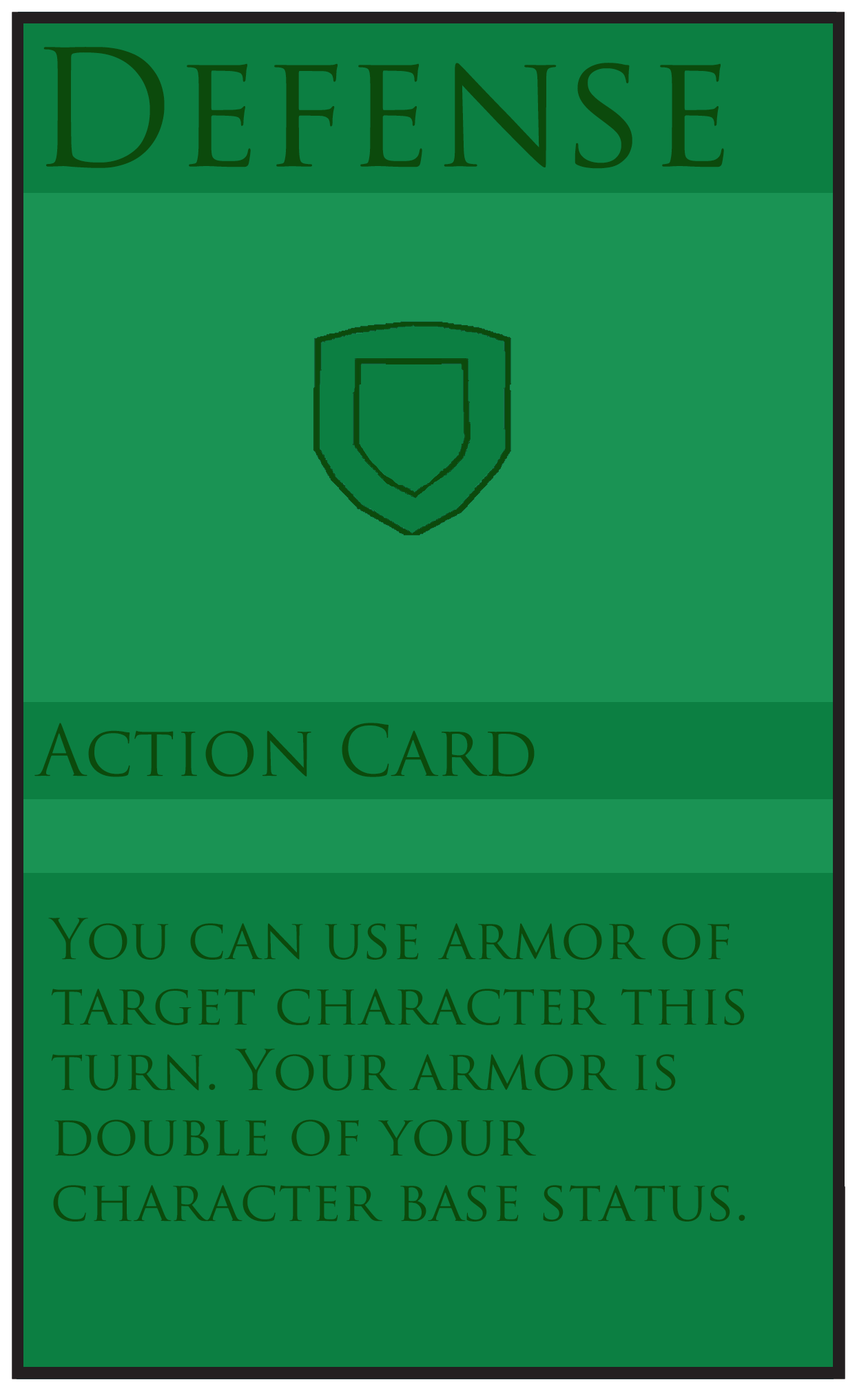
<style>
.page{position:relative;width:857px;height:1391px;background:#0c7f42}
.page>*{position:absolute;margin:0}
.t1{font:157.9px "TrajanPro-Regular";color:#0c4a0c}
.t2{font:68.9px "TrajanPro-Regular";color:#0c4a0c}
.t3{font:54.5px "TrajanPro-Regular";color:#0c4a0c}
</style>
<div class="page">
<p class="t1" style="left:43px;top:47px;width:681px;height:122px">Defense</p>
<p class="t2" style="left:34px;top:723px;width:501px;height:54px">Action Card</p>
<p class="t3" style="left:48px;top:918px;width:698px;height:304px">You can use armor of <br>target character this <br>turn. Your armor is <br>double of your <br>character base status.</p>
</div>
